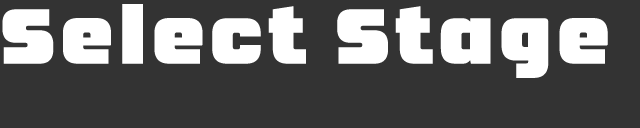
<style>
.page{position:relative;width:640px;height:128px;background:#333333}
.page>*{position:absolute;margin:0}
.t1{font:77.4px "NEOMETRA";letter-spacing:0.07em;color:#ffffff;scale:0.95 1}
</style>
<div class="page">
<p class="t1" style="left:2px;top:4px;width:606px;height:74px">Select Stage</p>
</div>
